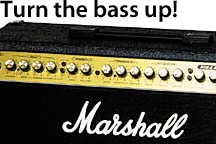
<style>
.page{position:relative;width:216px;height:144px}
.page>*{position:absolute;margin:0}
.t1{font:24px "MyriadPro-Semibold";color:#000000}
</style>
<div class="page">
<p class="t1" style="left:0px;top:0px;width:177px;height:22px">Turn the bass up!</p>
</div>
